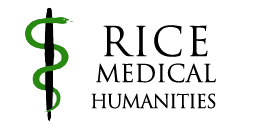
<style>
.page{position:relative;width:254px;height:130px;background:#ffffff}
.page>*{position:absolute;margin:0}
.t1{font:40px "TrajanPro-Regular";letter-spacing:0.05em;color:#000000}
.t2{font:24px "TrajanPro-Regular";letter-spacing:-0.01em;color:#000000}
.t3{font:18.7px "TrajanPro-Regular";letter-spacing:-0.05em;color:#000000}
</style>
<div class="page">
<p class="t1" style="left:103px;top:25px;width:105px;height:32px">RICE</p>
<p class="t2" style="left:96px;top:63px;width:120px;height:20px">MEDICAL</p>
<p class="t3" style="left:91px;top:93px;width:125px;height:16px">HUMANITIES</p>
</div>
